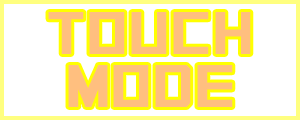
<style>
.page{position:relative;width:300px;height:120px;background:#ffffff}
.page>*{position:absolute;margin:0}
.t1{font:60px "SquareFont";color:#ffbf7f;scale:1.2 1}
</style>
<div class="page">
<p class="t1" style="left:48px;top:12px;width:203px;height:42px">touch</p>
<p class="t1" style="left:68px;top:65px;width:165px;height:42px">mode</p>
</div>
